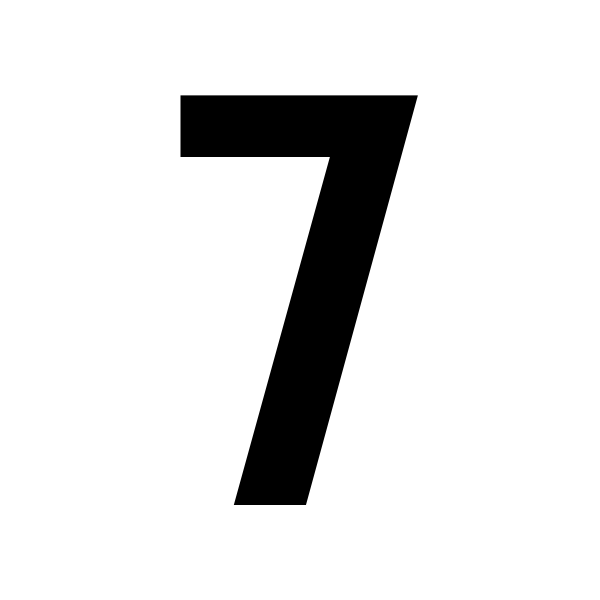
<style>
.page{position:relative;width:600px;height:600px;background:#ffffff}
.page>*{position:absolute;margin:0}
.t1{font:600px "KGWhattheTeacherWants";color:#000000}
</style>
<div class="page">
<p class="t1" style="left:180px;top:95px;width:238px;height:410px">7</p>
</div>
